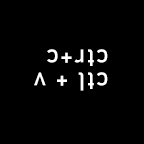
<style>
.page{position:relative;width:144px;height:144px;background:#000000}
.page>*{position:absolute;margin:0}
.t1{font:25.2px/17.7px "Bahnschrift";letter-spacing:0.05em;color:#ffffff}
</style>
<div class="page">
<p class="t1" style="left:34px;top:49px;width:74px;height:42px;rotate:-180deg">ctl + v<br>ctr+c</p>
</div>
